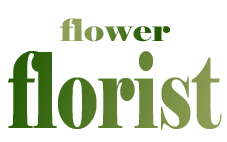
<style>
.page{position:relative;width:227px;height:142px;background:#ffffff}
.page>*{position:absolute;margin:0}
.t1{font:30.4px "Elephant-Regular";scale:1.16 1}
.t2{font:104.3px "Elephant-Regular";scale:0.68 1}
</style>
<div class="page">
<p class="t1" style="left:60px;top:18px;width:110px;height:24px">flower</p>
<p class="t2" style="left:8px;top:51px;width:214px;height:79px">florist</p>
</div>
